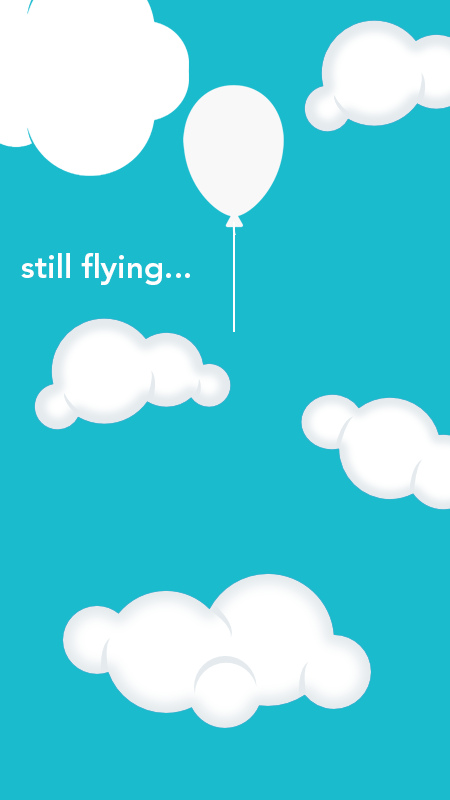
<style>
.page{position:relative;width:450px;height:800px;background:#1bbbce}
.page>*{position:absolute;margin:0}
.t1{font:32px "AvenirLTStd-Heavy";color:#ffffff}
</style>
<div class="page">
<p class="t1" style="left:21px;top:253px;width:169px;height:32px">still flying...</p>
</div>
